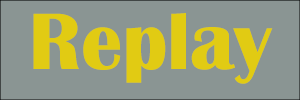
<style>
.page{position:relative;width:300px;height:100px;background:#8a9593}
.page>*{position:absolute;margin:0}
.t1{font:82.8px "BritannicBold";color:#e1cb13}
</style>
<div class="page">
<p class="t1" style="left:33px;top:13px;width:240px;height:71px">Replay</p>
</div>
